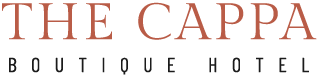
<style>
.page{position:relative;width:320px;height:76px;background:#ffffff}
.page>*{position:absolute;margin:0}
.t1{font:51px "GildaDisplay-Regular";letter-spacing:0.08em;color:#b95c47}
.t2{font:20.2px "BarlowCondensed-Regular";letter-spacing:0.705em;color:#1b1b1b;text-transform:uppercase}
</style>
<div class="page">
<p class="t1" style="left:2px;top:2px;width:315px;height:38px">THE CAPPA</p>
<p class="t2" style="left:9px;top:57px;width:300px;height:18px">Boutique HOTEL</p>
</div>
